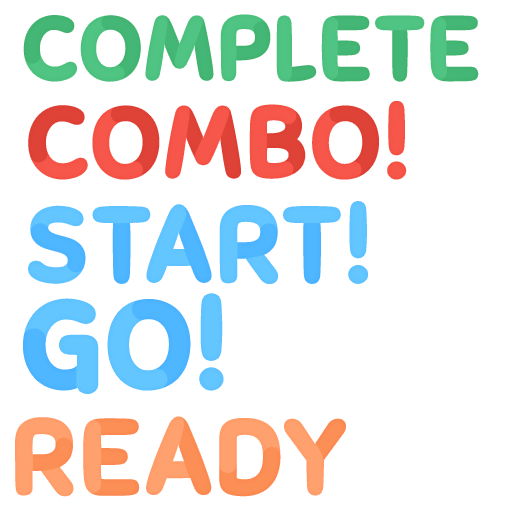
<style>
.page{position:relative;width:512px;height:512px;background:#ffffff}
.page>*{position:absolute;margin:0}
.t1{font:83.6px "Sniglet-Regular";letter-spacing:0.06em;color:#50c483;text-transform:uppercase;font-weight:bold;scale:1.05 1}
.t2{font:94.1px "Sniglet-Regular";letter-spacing:0.06em;color:#f6574a;text-transform:uppercase;font-weight:bold;scale:1.05 1}
.t3{font:99.3px "Sniglet-Regular";letter-spacing:0.06em;color:#64c6ff;text-transform:uppercase;font-weight:bold;scale:1.05 1}
.t4{font:115px "Sniglet-Regular";letter-spacing:0.06em;color:#64c6ff;text-transform:uppercase;font-weight:bold;scale:1.05 1}
.t5{font:99.3px "Sniglet-Regular";letter-spacing:0.06em;color:#ffa16e;text-transform:uppercase;font-weight:bold;scale:1.05 1}
</style>
<div class="page">
<p class="t1" style="left:25px;top:16px;width:452px;height:64px">Complete</p>
<p class="t2" style="left:30px;top:102px;width:375px;height:76px">COMBO!</p>
<p class="t3" style="left:30px;top:203px;width:336px;height:79px">Start!</p>
<p class="t4" style="left:26px;top:296px;width:195px;height:95px">GO!</p>
<p class="t5" style="left:17px;top:418px;width:327px;height:77px">READY</p>
</div>
